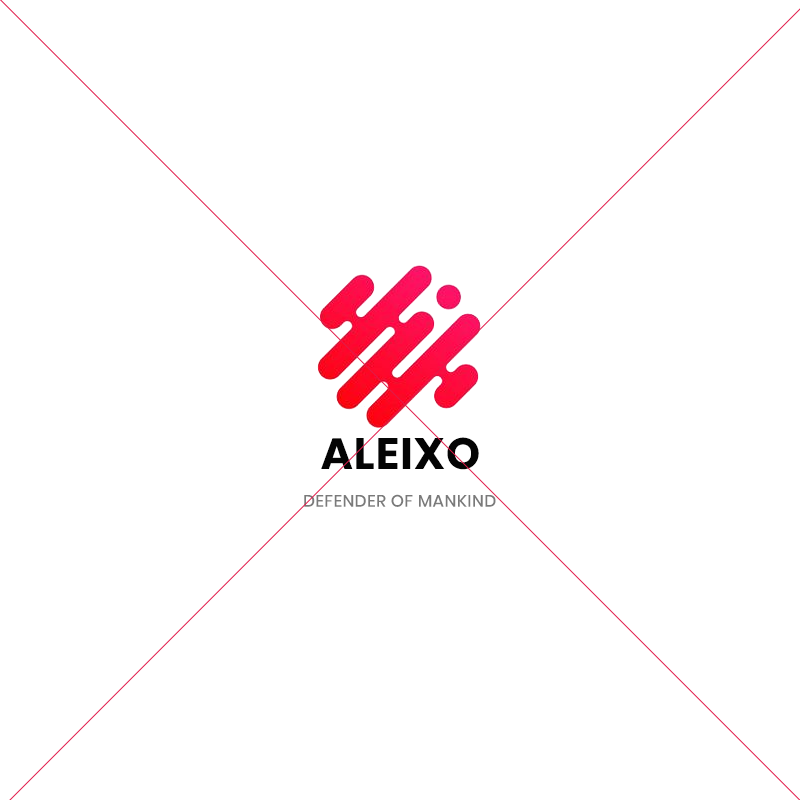
<style>
.page{position:relative;width:800px;height:800px;background:#ffffff}
.page>*{position:absolute;margin:0}
.t1{font:43.8px "Poppins-Bold";letter-spacing:0.025em;color:#040404;text-transform:uppercase}
.t2{font:16.7px "Poppins-Medium";letter-spacing:0.025em;color:#7a7a7a;text-transform:uppercase}
</style>
<div class="page">
<p class="t1" style="left:321px;top:437px;width:158px;height:33px">Aleixo</p>
<p class="t2" style="left:304px;top:494px;width:192px;height:13px">defender of mankind</p>
</div>
